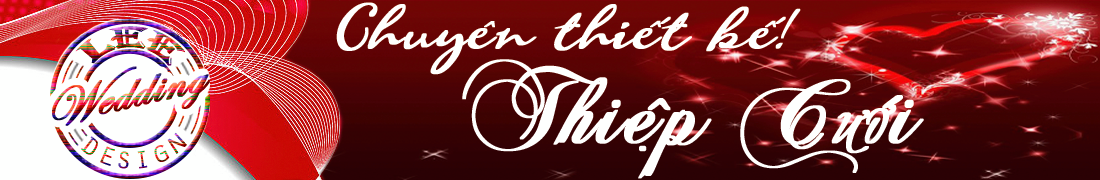
<style>
.page{position:relative;width:1100px;height:180px}
.page>*{position:absolute;margin:0}
.t1{font:60px "Vni24ScrapCursive";letter-spacing:0.004em;color:#fefffe;font-weight:bold;font-style:italic}
.t2{font:60px "VNI17Love";letter-spacing:0.004em;color:#fefffe;font-weight:bold;font-style:italic}
.t3{font:100px "VNIChopsNormal";letter-spacing:0.004em;color:#fefffe;font-weight:bold}
.t4{font:100px "Vni27AmbianceBTSwash";letter-spacing:0.004em;color:#fefffe;font-weight:bold}
</style>
<div class="page">
<p class="t1" style="left:336px;top:2px;width:465px;height:73px">Chuye<span class="t2">â</span>n thie<span class="t2">á</span>t ke<span class="t2">á!</span></p>
<p class="t3" style="left:462px;top:59px;width:462px;height:120px">Thie<span class="t4">ä</span>p C<span class="t4">öôù</span>i</p>
</div>
